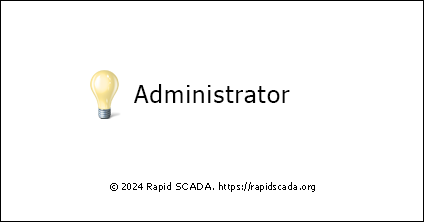
<style>
.page{position:relative;width:424px;height:222px;background:#ffffff}
.page>*{position:absolute;margin:0}
.t1{font:24px "Tahoma";letter-spacing:0.05em;color:#000000}
.t2{font:9px "Tahoma";letter-spacing:0.05em;color:#000000}
</style>
<div class="page">
<p class="t1" style="left:134px;top:84px;width:156px;height:19px">Administrator</p>
<p class="t2" style="left:110px;top:182px;width:205px;height:10px">© 2024 Rapid SCADA. https://rapidscada.org</p>
</div>
